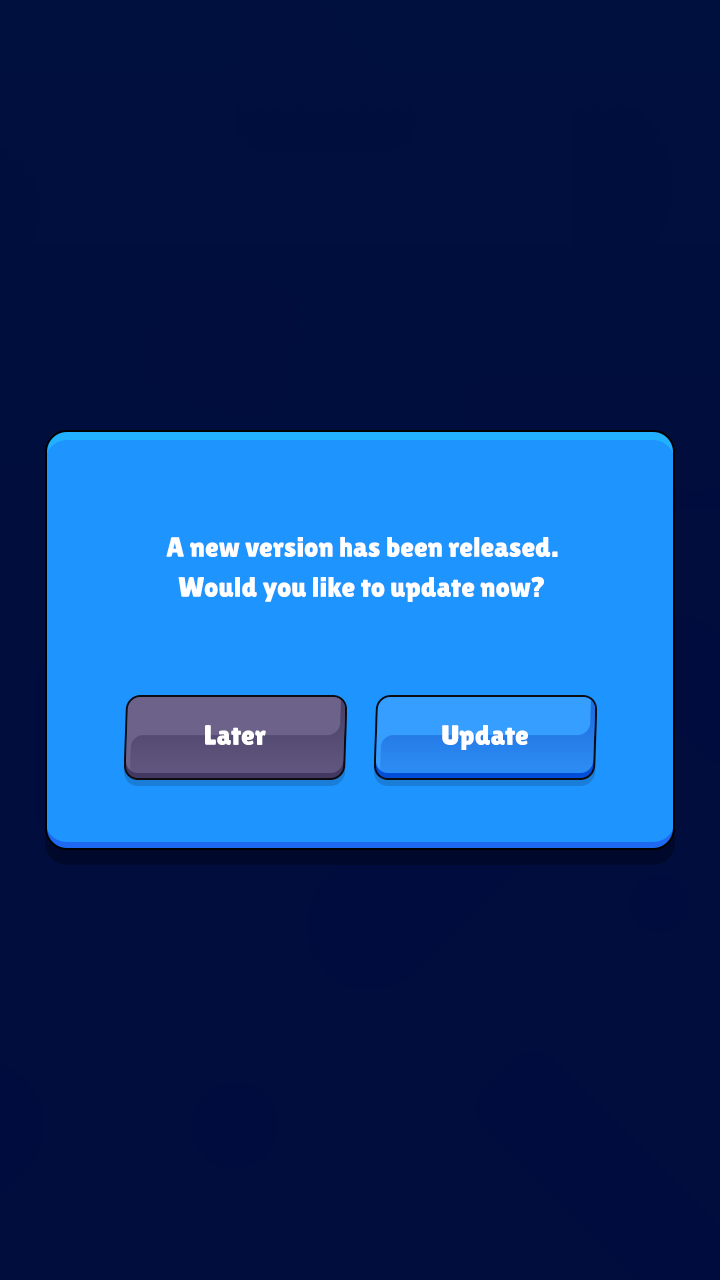
<style>
.page{position:relative;width:720px;height:1280px;background:#000d3d}
.page>*{position:absolute;margin:0}
.t1{font:28px/40px "LilitaOne";color:#ffffff}
.t2{font:28px "LilitaOne";color:#ffffff}
</style>
<div class="page">
<p class="t1" style="left:166px;top:536px;width:392px;height:66px;text-align:center">A new version has been released.<br>Would you like to update now?</p>
<p class="t2" style="left:205px;top:725px;width:61px;height:20px">Later</p>
<p class="t2" style="left:442px;top:725px;width:86px;height:25px">Update</p>
</div>
